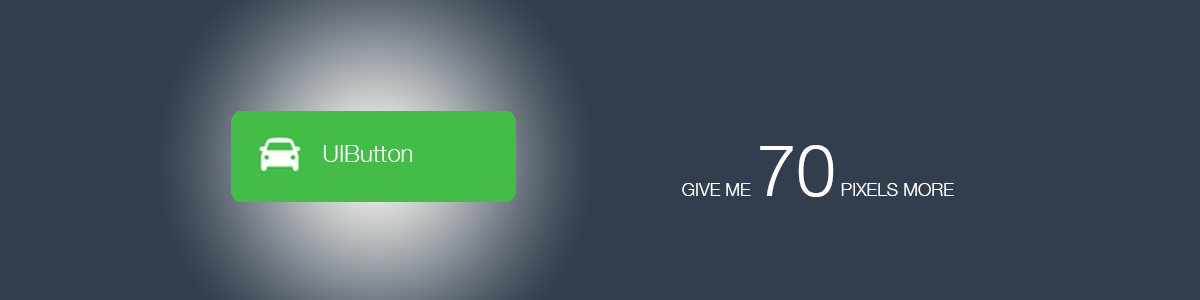
<style>
.page{position:relative;width:1200px;height:300px;background:#323e4e}
.page>*{position:absolute;margin:0}
.t1{font:24px "HelveticaNeue-Light";color:#ffffff}
.t2{font:18px "HelveticaNeue-Light";color:#ffffff}
.t3{font:72px "Helvetica-Light";color:#ffffff}
</style>
<div class="page">
<p class="t1" style="left:323px;top:145px;width:90px;height:17px">UIButton</p>
<p class="t2" style="left:682px;top:145px;width:272px;height:52px">GIVE ME <span class="t3">70</span> PIXELS MORE</p>
</div>
